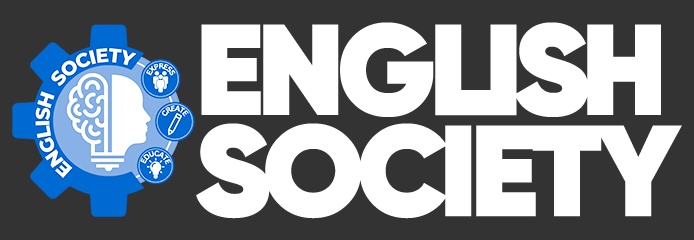
<style>
.page{position:relative;width:694px;height:240px;background:#333333}
.page>*{position:absolute;margin:0}
.t1{font:129px/101px "Gilroy-Heavy";letter-spacing:-0.06em;color:#ffffff}
</style>
<div class="page">
<p class="t1" style="left:196px;top:22px;width:486px;height:197px">ENGLISH<br>SOCIETY</p>
</div>
